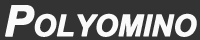
<style>
.page{position:relative;width:200px;height:40px;background:#333333}
.page>*{position:absolute;margin:0}
.t1{font:42.5px "Arial-BoldItalicMT";letter-spacing:-0.02em;color:#fafafa;font-variant:small-caps;font-weight:bold}
</style>
<div class="page">
<p class="t1" style="left:5px;top:5px;width:192px;height:32px">Polyomino</p>
</div>
